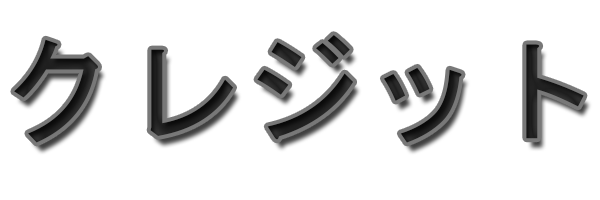
<style>
.page{position:relative;width:600px;height:200px;background:#ffffff}
.page>*{position:absolute;margin:0}
.t1{font:120px "MS-Gothic";color:#1e1e1e}
</style>
<div class="page">
<p class="t1" style="left:14px;top:35px;width:570px;height:108px">クレジット</p>
</div>
